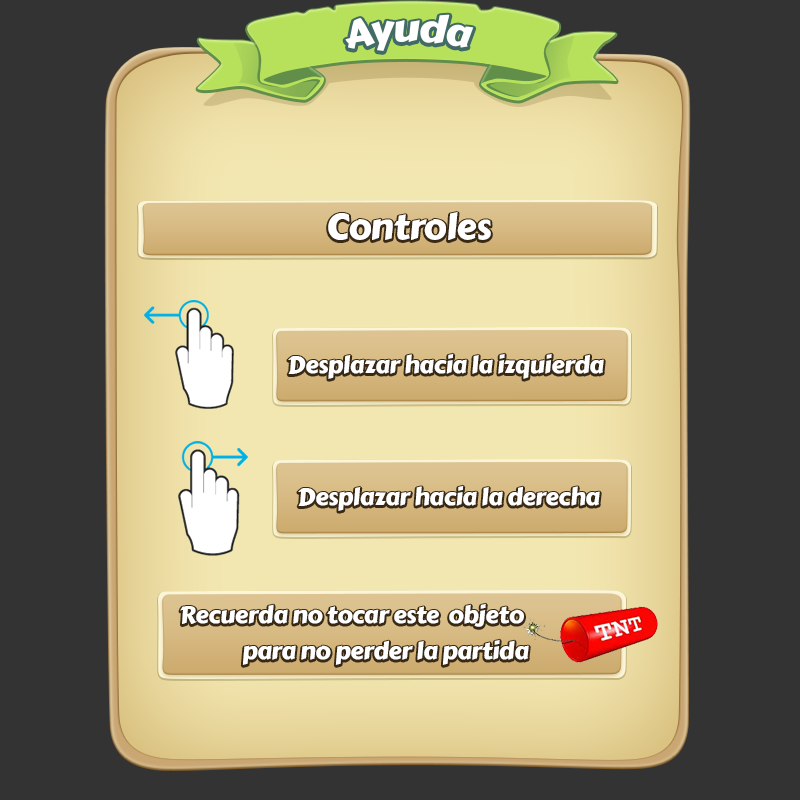
<style>
.page{position:relative;width:800px;height:800px;background:#333333}
.page>*{position:absolute;margin:0}
.t1{font:38px "CarterOne";letter-spacing:-0.02em;color:#ffffff}
.t2{font:36px "CarterOne";letter-spacing:-0.02em;color:#ffffff}
.t3{font:24px "CarterOne";letter-spacing:-0.02em;color:#ffffff}
.t4{font:24px/36.2px "CarterOne";letter-spacing:-0.02em;color:#ffffff}
</style>
<div class="page">
<p class="t1" style="left:345px;top:14px;width:129px;height:37px">Ayuda</p>
<p class="t2" style="left:328px;top:212px;width:163px;height:28px">Controles</p>
<p class="t3" style="left:288px;top:353px;width:316px;height:26px">Desplazar hacia la izquierda</p>
<p class="t3" style="left:298px;top:485px;width:302px;height:26px">Desplazar hacia la derecha</p>
<p class="t4" style="left:180px;top:603px;width:349px;height:62px;text-align:right">Recuerda no tocar este  objeto <br>para no perder la partida</p>
</div>
